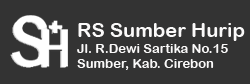
<style>
.page{position:relative;width:250px;height:84px;background:#333333}
.page>*{position:absolute;margin:0}
.t1{font:13px "ArialRoundedMTBold";color:#faf9f9}
.t2{font:20px "ArialRoundedMTBold";color:#faf9f9}
</style>
<div class="page">
<p class="t1" style="left:77px;top:23px;width:168px;height:47px"><span class="t2">RS Sumber Hurip<br></span>Jl. R.Dewi Sartika No.15<br>Sumber, Kab. Cirebon</p>
</div>
